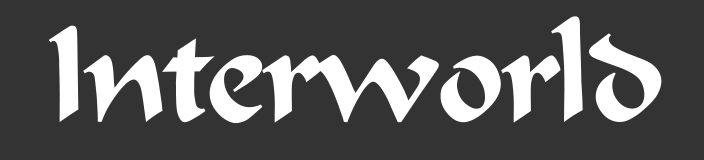
<style>
.page{position:relative;width:704px;height:160px;background:#333333}
.page>*{position:absolute;margin:0}
.t1{font:127.8px "Calligraphic";color:#ffffff}
</style>
<div class="page">
<p class="t1" style="left:48px;top:16px;width:614px;height:108px">Interworld</p>
</div>
